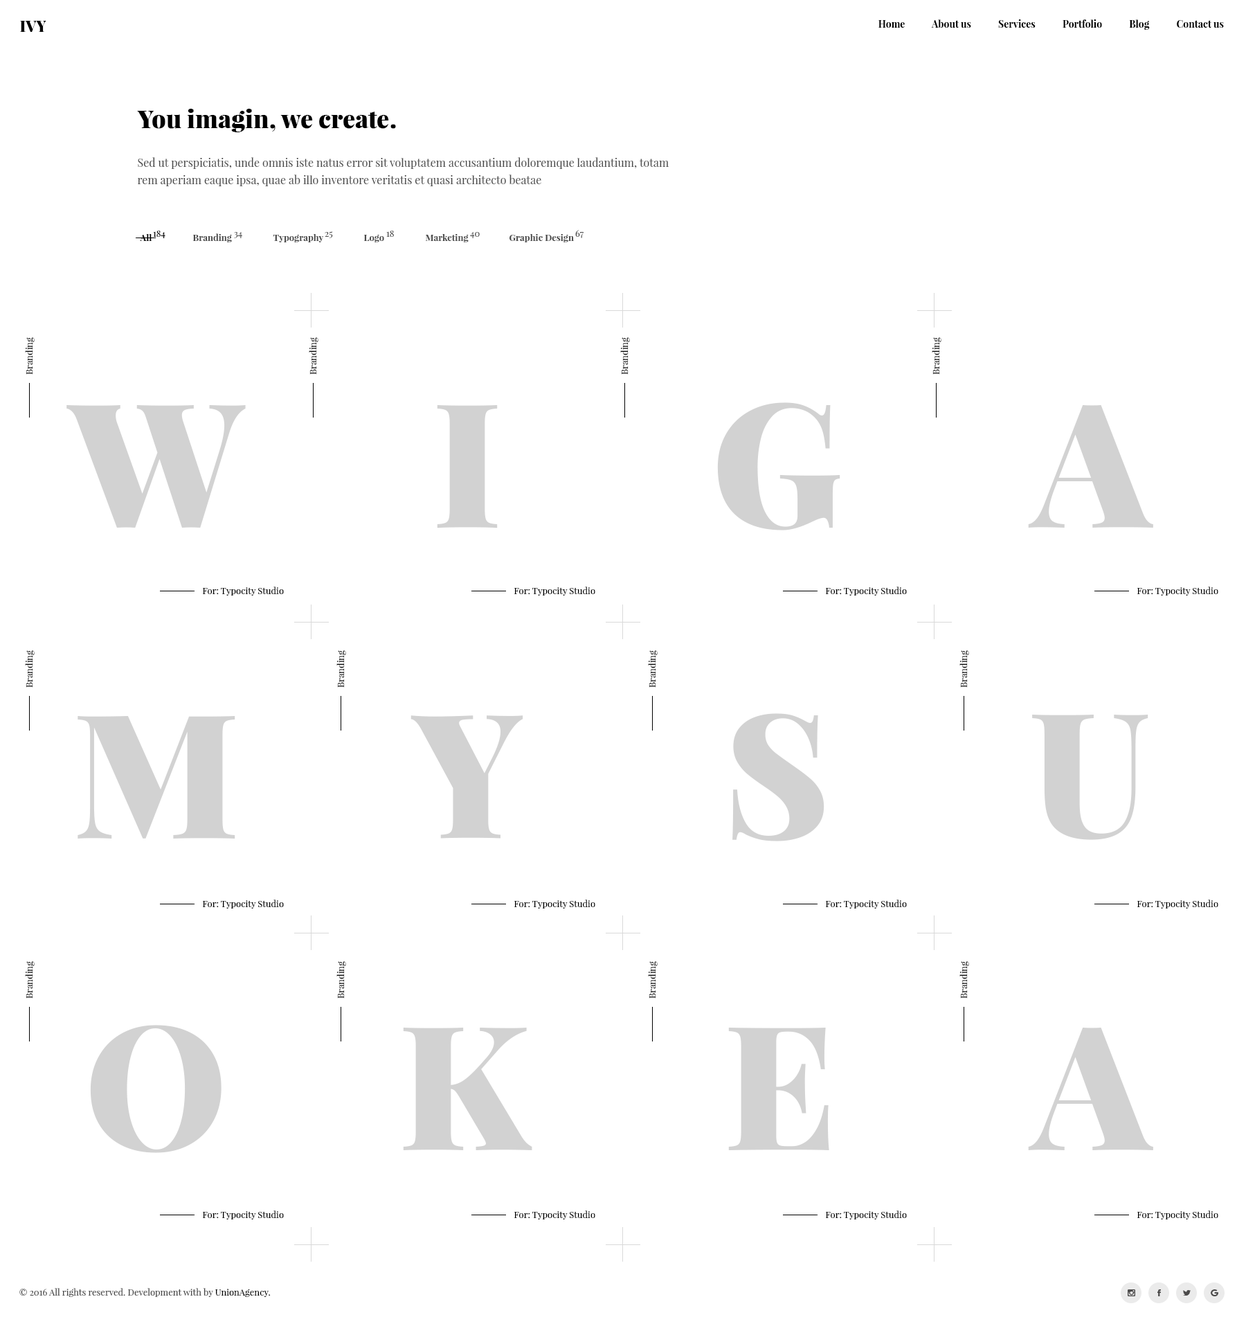
<style>
.page{position:relative;width:1246px;height:1324px;background:#ffffff}
.page>*{position:absolute;margin:0}
.t1{font:15.2px "PlayfairDisplay-Black";color:#000000}
.t2{font:9.7px "PlayfairDisplay-Bold";color:#000000}
.t3{font:24.9px "PlayfairDisplay-Black";color:#000000}
.t4{font:11.1px/17.3px "PlayfairDisplay-Regular";color:#494949}
.t5{font:9px "PlayfairDisplay-Regular";color:#000000}
.t6{font:9px "PlayfairDisplay-Bold";color:#494949}
.t7{font:9px "PlayfairDisplay-Regular";color:#494949}
.t8{font:9px "PlayfairDisplay-Bold";color:#000000}
.t9{font:8.8px "PlayfairDisplay-Regular";color:#000000}
.t10{font:173.1px "PlayfairDisplay-Black";color:#d2d2d2}
</style>
<div class="page">
<p class="t1" style="left:20px;top:21px;width:26px;height:11px">IVY</p>
<p class="t2" style="left:879px;top:19px;width:345px;height:11px">Home            About us            Services            Portfolio            Blog            Contact us</p>
<p class="t3" style="left:137px;top:109px;width:259px;height:23px">You imagin, we create.</p>
<p class="t4" style="left:138px;top:157px;width:531px;height:29px">Sed ut perspiciatis, unde omnis iste natus error sit voluptatem accusantium doloremque laudantium, totam<br>rem aperiam eaque ipsa, quae ab illo inventore veritatis et quasi architecto beatae</p>
<p class="t5" style="left:153px;top:231px;width:12px;height:7px">184</p>
<p class="t6" style="left:192px;top:233px;width:40px;height:9px">Branding</p>
<p class="t7" style="left:234px;top:232px;width:8px;height:6px">34</p>
<p class="t7" style="left:325px;top:231px;width:8px;height:7px">25</p>
<p class="t7" style="left:386px;top:231px;width:8px;height:6px">18</p>
<p class="t7" style="left:470px;top:232px;width:10px;height:6px">40</p>
<p class="t7" style="left:575px;top:230px;width:9px;height:8px">67</p>
<p class="t8" style="left:140px;top:234px;width:12px;height:7px">All</p>
<p class="t6" style="left:273px;top:234px;width:51px;height:8px">Typography</p>
<p class="t6" style="left:363px;top:235px;width:21px;height:7px">Logo</p>
<p class="t6" style="left:426px;top:234px;width:43px;height:8px">Marketing</p>
<p class="t6" style="left:510px;top:234px;width:64px;height:8px">Graphic Design</p>
<p class="t9" style="left:25px;top:337px;width:10px;height:38px;rotate:-90deg">Branding</p>
<p class="t9" style="left:309px;top:337px;width:9px;height:38px;rotate:-90deg">Branding</p>
<p class="t9" style="left:620px;top:337px;width:10px;height:38px;rotate:-90deg">Branding</p>
<p class="t9" style="left:932px;top:337px;width:10px;height:38px;rotate:-90deg">Branding</p>
<p class="t10" style="left:66px;top:405px;width:180px;height:123px">W</p>
<p class="t10" style="left:437px;top:405px;width:61px;height:123px">I</p>
<p class="t10" style="left:717px;top:402px;width:123px;height:128px">G</p>
<p class="t10" style="left:1028px;top:405px;width:125px;height:123px">A</p>
<p class="t5" style="left:202px;top:586px;width:82px;height:9px">For: Typocity Studio</p>
<p class="t5" style="left:514px;top:586px;width:81px;height:9px">For: Typocity Studio</p>
<p class="t5" style="left:825px;top:586px;width:82px;height:9px">For: Typocity Studio</p>
<p class="t5" style="left:1137px;top:586px;width:81px;height:9px">For: Typocity Studio</p>
<p class="t9" style="left:25px;top:650px;width:10px;height:37px;rotate:-90deg">Branding</p>
<p class="t9" style="left:336px;top:650px;width:10px;height:37px;rotate:-90deg">Branding</p>
<p class="t9" style="left:648px;top:650px;width:10px;height:37px;rotate:-90deg">Branding</p>
<p class="t9" style="left:960px;top:650px;width:9px;height:37px;rotate:-90deg">Branding</p>
<p class="t10" style="left:732px;top:713px;width:93px;height:128px">S</p>
<p class="t10" style="left:78px;top:716px;width:157px;height:122px">M</p>
<p class="t10" style="left:411px;top:715px;width:112px;height:123px">Y</p>
<p class="t10" style="left:1032px;top:714px;width:117px;height:126px">U</p>
<p class="t5" style="left:202px;top:899px;width:82px;height:9px">For: Typocity Studio</p>
<p class="t5" style="left:514px;top:899px;width:81px;height:9px">For: Typocity Studio</p>
<p class="t5" style="left:825px;top:899px;width:82px;height:9px">For: Typocity Studio</p>
<p class="t5" style="left:1137px;top:899px;width:81px;height:9px">For: Typocity Studio</p>
<p class="t9" style="left:25px;top:961px;width:10px;height:37px;rotate:-90deg">Branding</p>
<p class="t9" style="left:336px;top:961px;width:10px;height:37px;rotate:-90deg">Branding</p>
<p class="t9" style="left:648px;top:961px;width:10px;height:37px;rotate:-90deg">Branding</p>
<p class="t9" style="left:960px;top:961px;width:9px;height:37px;rotate:-90deg">Branding</p>
<p class="t10" style="left:90px;top:1025px;width:132px;height:128px">O</p>
<p class="t10" style="left:403px;top:1027px;width:129px;height:123px">K</p>
<p class="t10" style="left:728px;top:1027px;width:101px;height:123px">E</p>
<p class="t10" style="left:1028px;top:1027px;width:125px;height:123px">A</p>
<p class="t5" style="left:202px;top:1210px;width:82px;height:9px">For: Typocity Studio</p>
<p class="t5" style="left:514px;top:1210px;width:81px;height:9px">For: Typocity Studio</p>
<p class="t5" style="left:825px;top:1210px;width:82px;height:9px">For: Typocity Studio</p>
<p class="t5" style="left:1137px;top:1210px;width:81px;height:9px">For: Typocity Studio</p>
<p class="t7" style="left:19px;top:1288px;width:252px;height:9px">© 2016 All rights reserved. Development with by <span class="t5">UnionAgency.</span></p>
</div>
